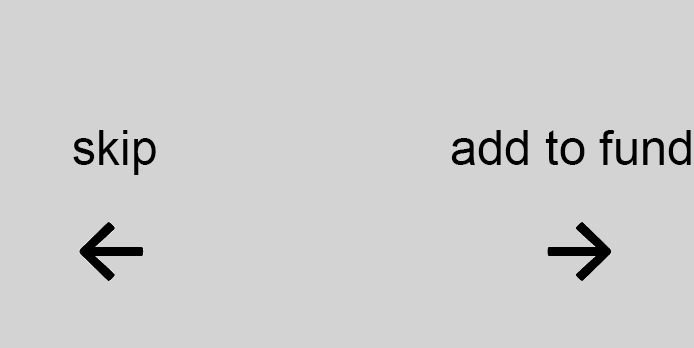
<style>
.page{position:relative;width:694px;height:348px;background:#d3d3d3}
.page>*{position:absolute;margin:0}
.t1{font:48.4px "ArialMT";color:#000000}
.t2{font:48.8px "ArialMT";color:#000000}
</style>
<div class="page">
<p class="t1" style="left:73px;top:130px;width:83px;height:45px">skip</p>
<p class="t2" style="left:451px;top:130px;width:240px;height:35px">add to fund</p>
</div>
